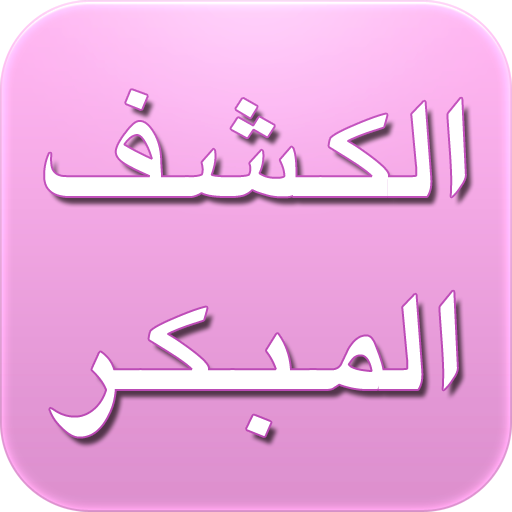
<style>
.page{position:relative;width:512px;height:512px}
.page>*{position:absolute;margin:0}
.t1{font:161px "KacstOne";color:#ffffff}
</style>
<div class="page">
<p class="t1" style="left:45px;top:90px;width:420px;height:347px;text-align:center">الكـشـف<br>المـبـكـر</p>
</div>
